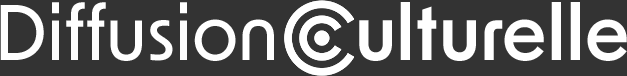
<style>
.page{position:relative;width:627px;height:76px;background:#333333}
.page>*{position:absolute;margin:0}
.t1{font:75px "NewOrder-Medium";color:#ffffff}
.t2{font:75px "NewOrder-Semibold";color:#ffffff}
</style>
<div class="page">
<p class="t1" style="left:0px;top:2px;width:274px;height:59px">Diffusion</p>
<p class="t2" style="left:359px;top:2px;width:268px;height:59px">ulturelle</p>
</div>
